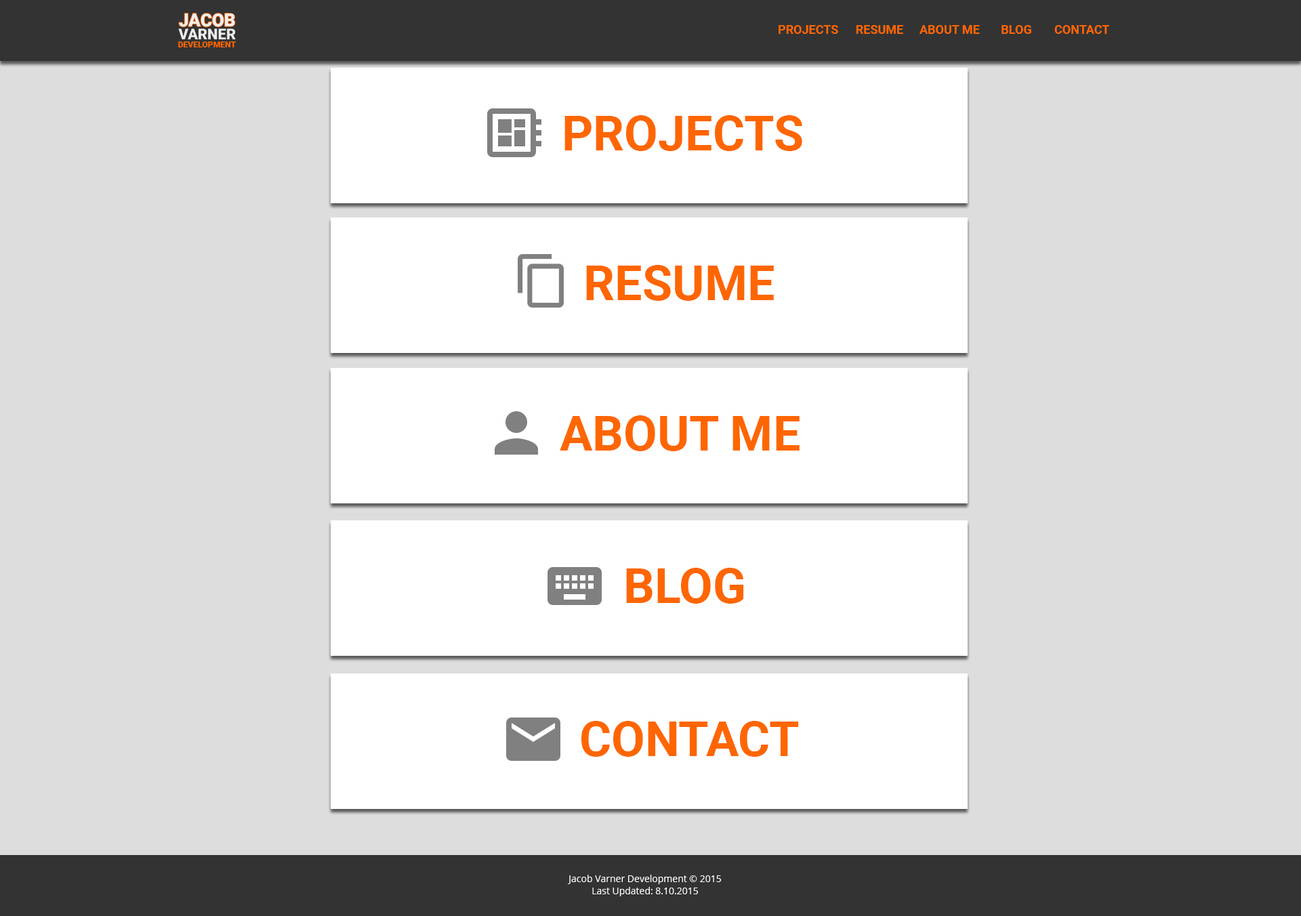
<style>
.page{position:relative;width:1301px;height:916px;background:#dddddd}
.page>*{position:absolute;margin:0}
.t1{font:12.2px "Roboto-Bold";color:#ff6600}
.t2{font:48.8px "Roboto-Bold";color:#ff6600}
</style>
<div class="page">
<p class="t1" style="left:779px;top:25px;width:59px;height:9px">PROJECTS</p>
<p class="t1" style="left:856px;top:25px;width:47px;height:9px">RESUME</p>
<p class="t1" style="left:920px;top:25px;width:60px;height:9px">ABOUT ME</p>
<p class="t1" style="left:1002px;top:25px;width:30px;height:9px">BLOG</p>
<p class="t1" style="left:1055px;top:25px;width:54px;height:9px">CONTACT</p>
<p class="t2" style="left:565px;top:115px;width:237px;height:36px">PROJECTS</p>
<p class="t2" style="left:586px;top:265px;width:188px;height:36px">RESUME</p>
<p class="t2" style="left:560px;top:415px;width:240px;height:36px">ABOUT ME</p>
<p class="t2" style="left:626px;top:568px;width:118px;height:36px">BLOG</p>
<p class="t2" style="left:582px;top:721px;width:217px;height:36px">CONTACT</p>
</div>
